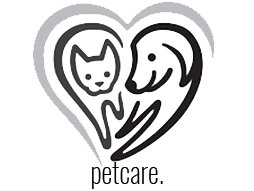
<style>
.page{position:relative;width:254px;height:191px;background:#ffffff}
.page>*{position:absolute;margin:0}
.t1{font:27.8px "Oswald-ExtraLight";color:#000000}
</style>
<div class="page">
<p class="t1" style="left:92px;top:162px;width:71px;height:27px">petcare.</p>
</div>
